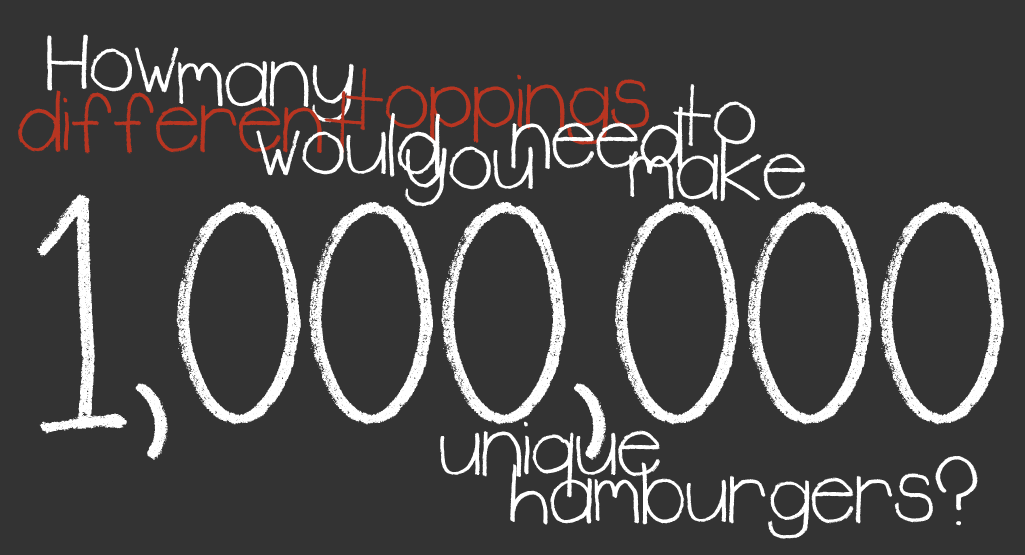
<style>
.page{position:relative;width:1025px;height:555px;background:#333333}
.page>*{position:absolute;margin:0}
.t1{font:100px "Rudiment";color:#ffffff}
.t2{font:100px "Rudiment";color:#b83521}
.t3{font:300px "Rudiment";color:#ffffff}
</style>
<div class="page">
<p class="t1" style="left:47px;top:34px;width:132px;height:59px">How</p>
<p class="t1" style="left:178px;top:61px;width:176px;height:62px">many</p>
<p class="t2" style="left:345px;top:68px;width:305px;height:77px">toppings</p>
<p class="t1" style="left:673px;top:84px;width:83px;height:63px">to</p>
<p class="t2" style="left:18px;top:90px;width:345px;height:64px">different</p>
<p class="t1" style="left:256px;top:112px;width:184px;height:65px">would</p>
<p class="t1" style="left:511px;top:106px;width:172px;height:63px">need</p>
<p class="t1" style="left:629px;top:135px;width:177px;height:67px">make</p>
<p class="t1" style="left:404px;top:146px;width:129px;height:61px">you</p>
<p class="t3" style="left:37px;top:194px;width:967px;height:266px">1,000,000</p>
<p class="t1" style="left:440px;top:421px;width:220px;height:77px">unique</p>
<p class="t1" style="left:510px;top:456px;width:468px;height:83px">hamburgers?</p>
</div>
